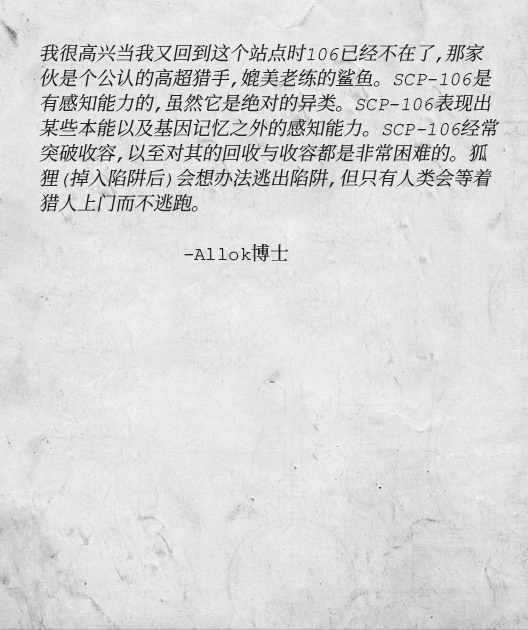
<style>
.page{position:relative;width:528px;height:630px}
.page>*{position:absolute;margin:0}
.t1{font:19px/25px "ContainmentBreach-Regular";color:#242424;font-style:italic}
.t2{font:19px/25px "ContainmentBreach-Regular";color:#242424}
</style>
<div class="page">
<p class="t1" style="left:39px;top:43px;width:461px;height:219px">我很高兴当我又回到这个站点时106已经不在了，那家<br>伙是个公认的高超猎手，媲美老练的鲨鱼。SCP-106是<br>有感知能力的，虽然它是绝对的异类。SCP-106表现出<br>某些本能以及基因记忆之外的感知能力。SCP-106经常<br>突破收容，以至对其的回收与收容都是非常困难的。狐<br>狸（掉入陷阱后）会想办法逃出陷阱，但只有人类会等着<br>猎人上门而不逃跑。<br><br>    <span class="t2">-Allok博士</span></p>
</div>
